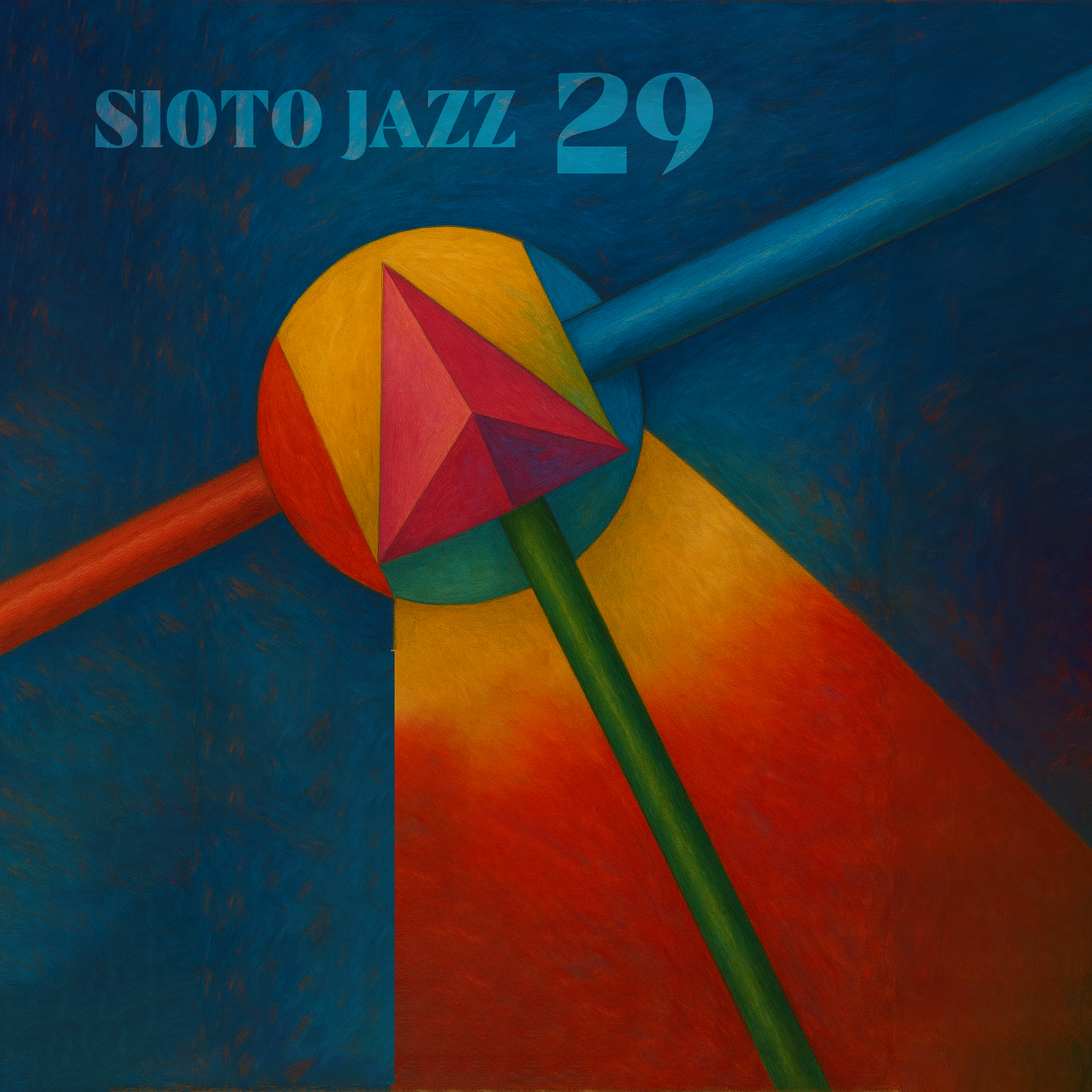
<style>
.page{position:relative;width:1092px;height:1092px}
.page>*{position:absolute;margin:0}
.t1{font:140.7px "Astrella-Regular";color:#0c7b9a}
.t2{font:81.4px "Astrella-Regular";color:#087491}
</style>
<div class="page">
<p class="t1" style="left:557px;top:73px;width:157px;height:103px">29</p>
<p class="t2" style="left:95px;top:90px;width:420px;height:70px">SIOTO JAZZ</p>
</div>
